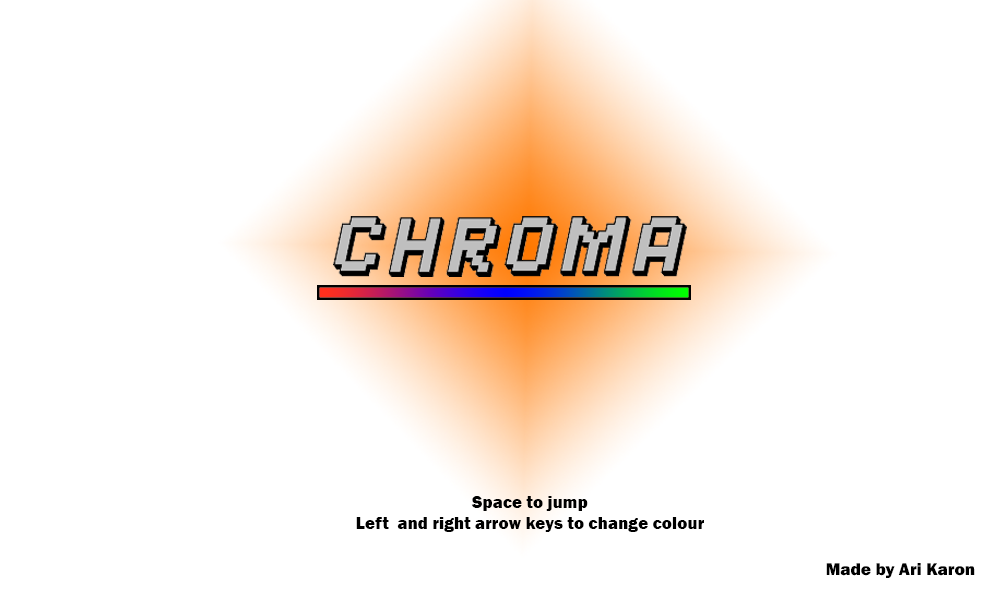
<style>
.page{position:relative;width:1000px;height:600px;background:#ffffff}
.page>*{position:absolute;margin:0}
.t1{font:17.3px "FranklinGothic-Heavy";color:#000000}
.t2{font:13.1px "FranklinGothic-Heavy";color:#000000}
</style>
<div class="page">
<p class="t1" style="left:356px;top:496px;width:348px;height:36px;text-align:center">Space to jump<br>Left  and right arrow keys to change colour</p>
<p class="t2" style="left:826px;top:563px;width:149px;height:15px">Made by Ari Karon</p>
</div>
